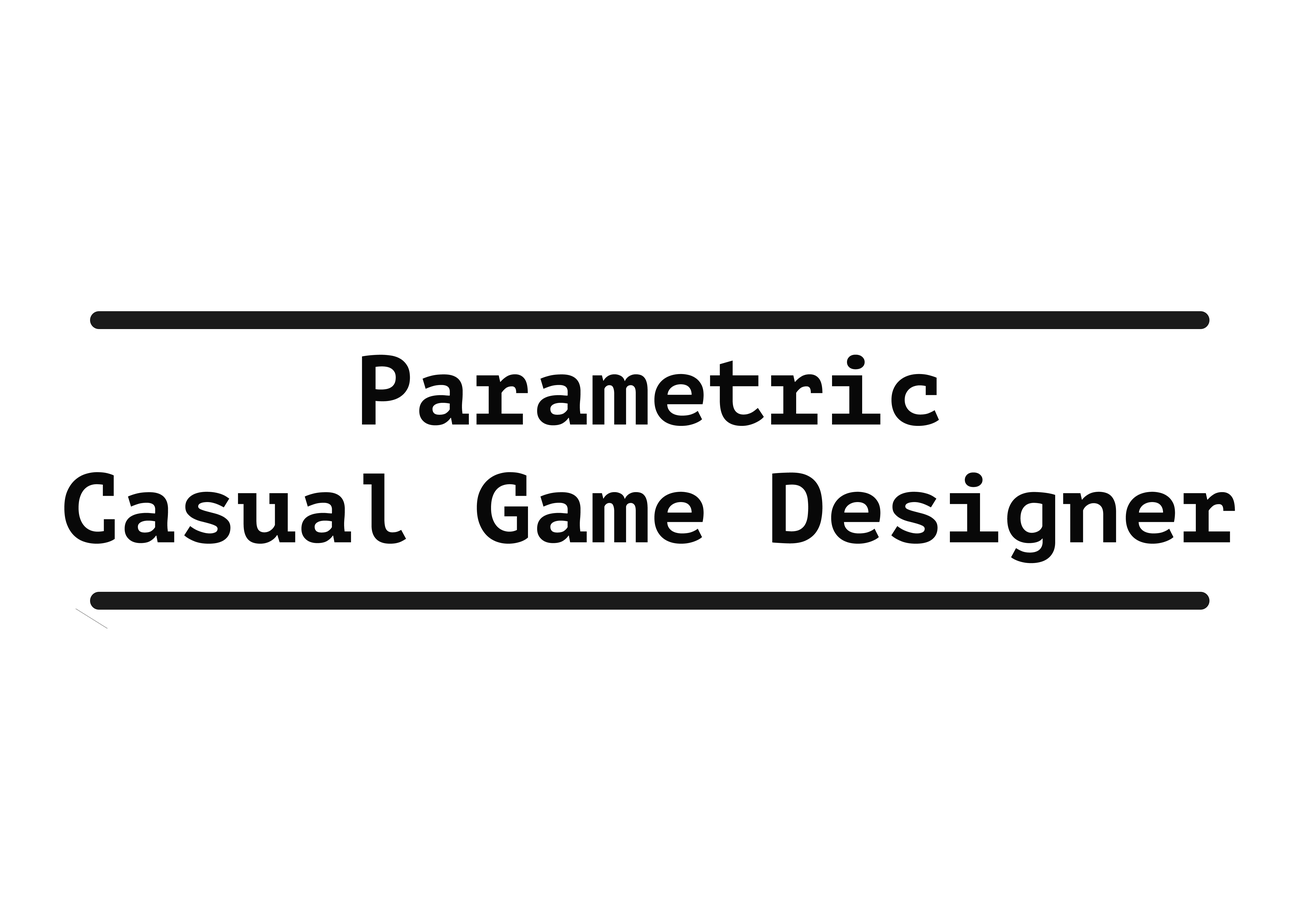
<style>
.page{position:relative;width:1299px;height:918px;background:#ffffff}
.page>*{position:absolute;margin:0}
.t1{font:98.2px "PTMono-Bold";color:#080808}
</style>
<div class="page">
<p class="t1" style="left:64px;top:355px;width:1171px;height:208px;text-align:center">Parametric<br>Casual Game Designer</p>
</div>
